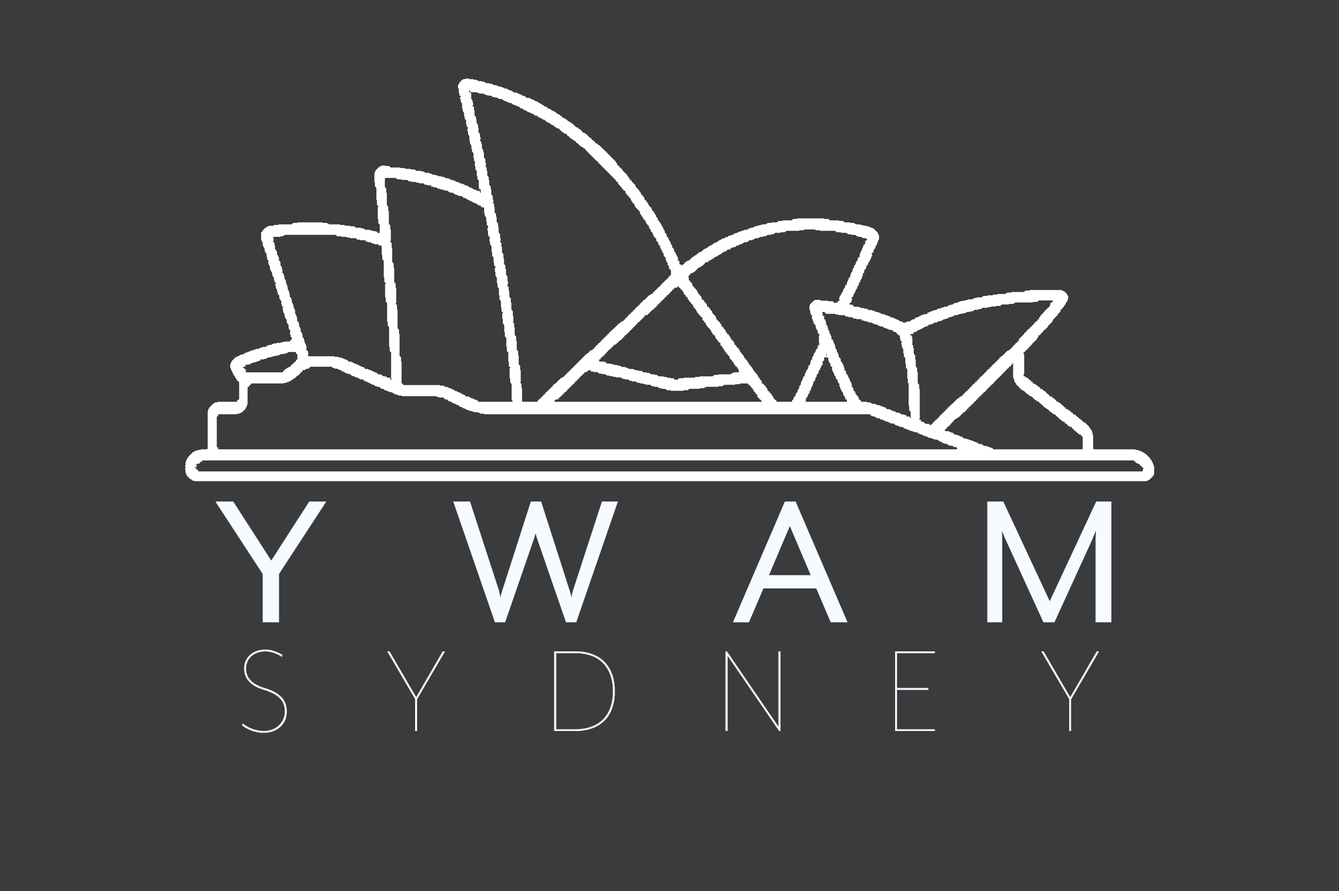
<style>
.page{position:relative;width:1339px;height:891px;background:#3a3b3c}
.page>*{position:absolute;margin:0}
.t1{font:200.8px "MrEavesXLModOT-Reg";letter-spacing:0.63em;color:#f7fbff;text-transform:uppercase}
.t2{font:132.5px "MrEavesXLModOT-Thin";letter-spacing:0.73em;color:#f7fbff;text-transform:uppercase}
</style>
<div class="page">
<p class="t1" style="left:216px;top:501px;width:895px;height:121px">YWAM</p>
<p class="t2" style="left:242px;top:649px;width:857px;height:84px">SYDNEY</p>
</div>
